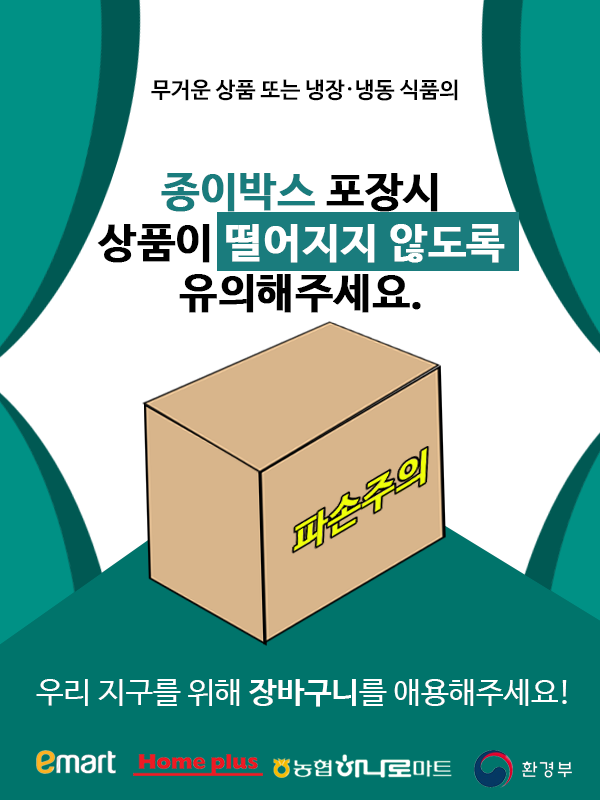
<style>
.page{position:relative;width:600px;height:800px;background:#ffffff}
.page>*{position:absolute;margin:0}
.t1{font:22.1px "NanumBarunGothicBold";color:#000000}
.t2{font:42px "NanumBarunGothicBold";color:#ffffff;font-weight:bold}
.t3{font:42px "NanumBarunGothicBold";color:#1a7c7d;font-weight:bold}
.t4{font:42px "NanumBarunGothicBold";color:#000000;font-weight:bold}
.t5{font:37.6px "NanumBarunGothicBold";color:#f0ff0a;font-weight:bold;scale:1.13 1}
.t6{font:30.2px "NanumBarunGothic";color:#ffffff}
.t7{font:30.2px "NanumBarunGothicBold";color:#ffffff}
</style>
<div class="page">
<p class="t1" style="left:151px;top:79px;width:307px;height:22px">무거운 상품 또는 냉장·냉동 식품의</p>
<p class="t2" style="left:97px;top:173px;width:408px;height:140px;text-align:center"><span class="t3">종이박스</span><span class="t4"> 포장시<br>상품이 </span>떨어지지 않도록<br><span class="t4">유의해주세요.</span></p>
<p class="t5" style="left:293px;top:448px;width:135px;height:103px;rotate:-31deg">파손주의</p>
<p class="t6" style="left:36px;top:679px;width:531px;height:28px">우리 지구를 위해 <span class="t7">장바구니</span>를 애용해주세요!</p>
</div>
